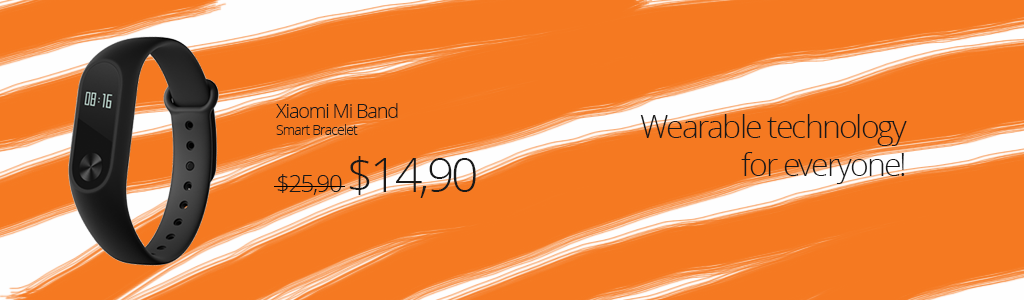
<style>
.page{position:relative;width:1024px;height:300px;background:#f57921}
.page>*{position:absolute;margin:0}
.t1{font:20px/36px "OpenSans-Light";letter-spacing:-0.06em;color:#191919}
.t2{font:14px "OpenSans-Light";letter-spacing:-0.06em;color:#191919}
.t3{font:24px "OpenSans-Light";letter-spacing:-0.06em;color:#191919}
.t4{font:48px "OpenSans-Light";letter-spacing:-0.06em;color:#191919}
.t5{font:32px "OpenSans-Light";letter-spacing:-0.06em;color:#191919}
</style>
<div class="page">
<p class="t1" style="left:276px;top:103px;width:200px;height:95px">Xiaomi Mi Band<br><span class="t2">Smart Bracelet<br></span><span class="t3">$25,90 </span><span class="t4">$14,90</span></p>
<p class="t5" style="left:640px;top:114px;width:267px;height:70px;text-align:right">Wearable technology<br>for everyone!</p>
</div>
